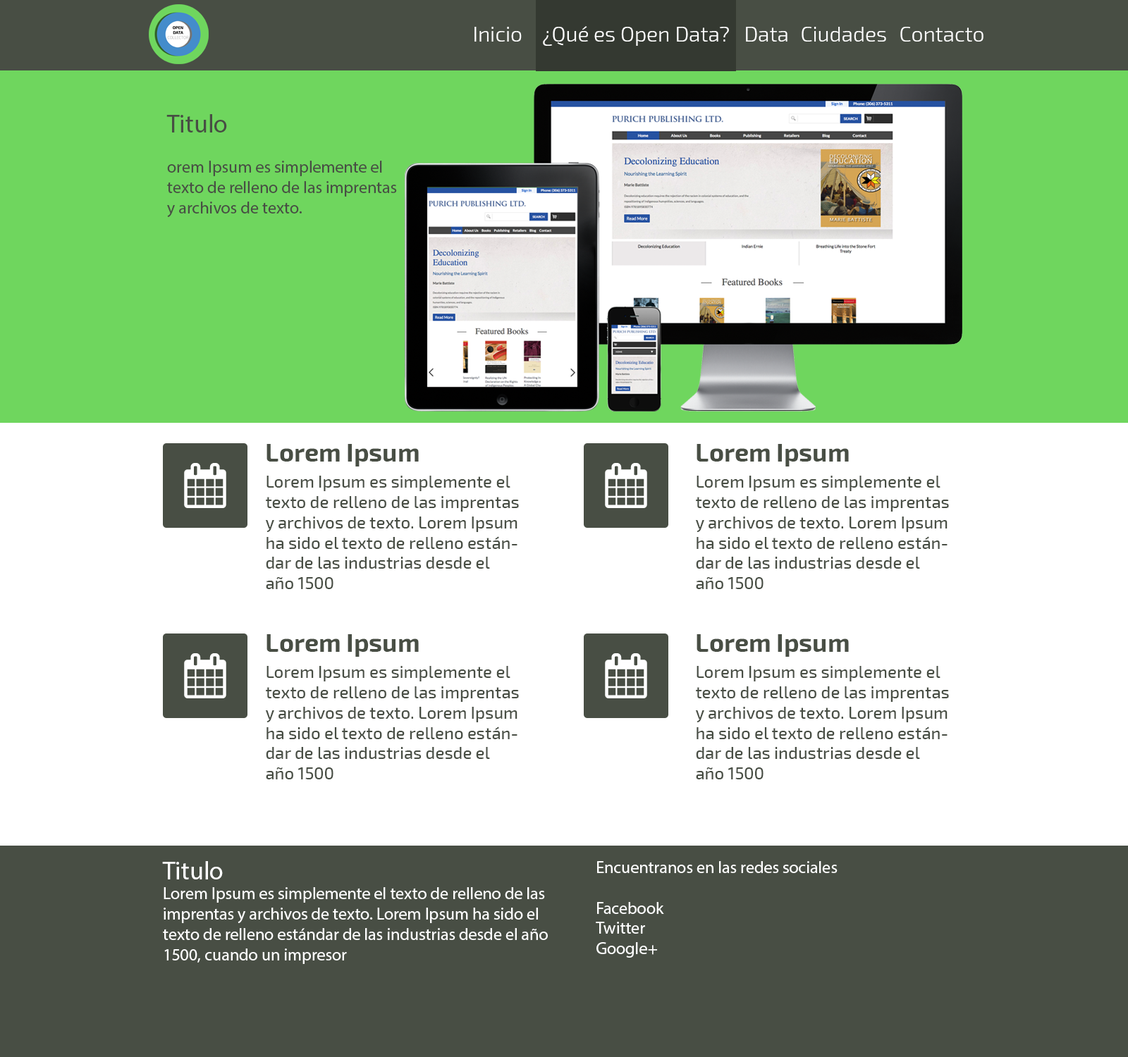
<style>
.page{position:relative;width:1128px;height:1057px;background:#ffffff}
.page>*{position:absolute;margin:0}
.t1{font:21.1px "Exo2-Light";color:#ffffff}
.t2{font:16.9px "MyriadPro-Regular";color:#484e44}
.t3{font:25.4px "MyriadPro-Regular";color:#484e44}
.t4{font:25.4px "Exo2-Bold";color:#484e44}
.t5{font:16.9px "Exo2-Medium";color:#484e44}
.t6{font:16.9px "MyriadPro-Regular";color:#ffffff}
.t7{font:25.4px "MyriadPro-Regular";color:#ffffff}
</style>
<div class="page">
<p class="t1" style="left:474px;top:27px;width:48px;height:15px">Inicio</p>
<p class="t1" style="left:543px;top:26px;width:186px;height:20px">¿Qué es Open Data?</p>
<p class="t1" style="left:746px;top:27px;width:41px;height:15px">Data</p>
<p class="t1" style="left:801px;top:27px;width:85px;height:15px">Ciudades</p>
<p class="t1" style="left:900px;top:27px;width:83px;height:15px">Contacto</p>
<p class="t2" style="left:166px;top:114px;width:231px;height:103px"><span class="t3">Titulo<br></span><br>orem Ipsum es simplemente el texto de relleno de las imprentas y archivos de texto.</p>
<p class="t4" style="left:266px;top:444px;width:153px;height:23px">Lorem Ipsum</p>
<p class="t4" style="left:696px;top:444px;width:153px;height:23px">Lorem Ipsum</p>
<p class="t5" style="left:265px;top:476px;width:254px;height:113px">Lorem Ipsum es simplemente el texto de relleno de las imprentas y archivos de texto. Lorem Ipsum ha sido el texto de relleno estándar de las industrias desde el año 1500</p>
<p class="t5" style="left:695px;top:476px;width:254px;height:113px">Lorem Ipsum es simplemente el texto de relleno de las imprentas y archivos de texto. Lorem Ipsum ha sido el texto de relleno estándar de las industrias desde el año 1500</p>
<p class="t4" style="left:266px;top:634px;width:153px;height:23px">Lorem Ipsum</p>
<p class="t4" style="left:696px;top:634px;width:153px;height:23px">Lorem Ipsum</p>
<p class="t5" style="left:265px;top:666px;width:254px;height:114px">Lorem Ipsum es simplemente el texto de relleno de las imprentas y archivos de texto. Lorem Ipsum ha sido el texto de relleno estándar de las industrias desde el año 1500</p>
<p class="t5" style="left:695px;top:666px;width:254px;height:114px">Lorem Ipsum es simplemente el texto de relleno de las imprentas y archivos de texto. Lorem Ipsum ha sido el texto de relleno estándar de las industrias desde el año 1500</p>
<p class="t6" style="left:162px;top:861px;width:386px;height:103px"><span class="t7">Titulo</span><br>Lorem Ipsum es simplemente el texto de relleno de las imprentas y archivos de texto. Lorem Ipsum ha sido el texto de relleno estándar de las industrias desde el año 1500, cuando un impresor</p>
<p class="t6" style="left:596px;top:861px;width:241px;height:97px">Encuentranos en las redes sociales<br><br>Facebook<br>Twitter<br>Google+</p>
</div>
